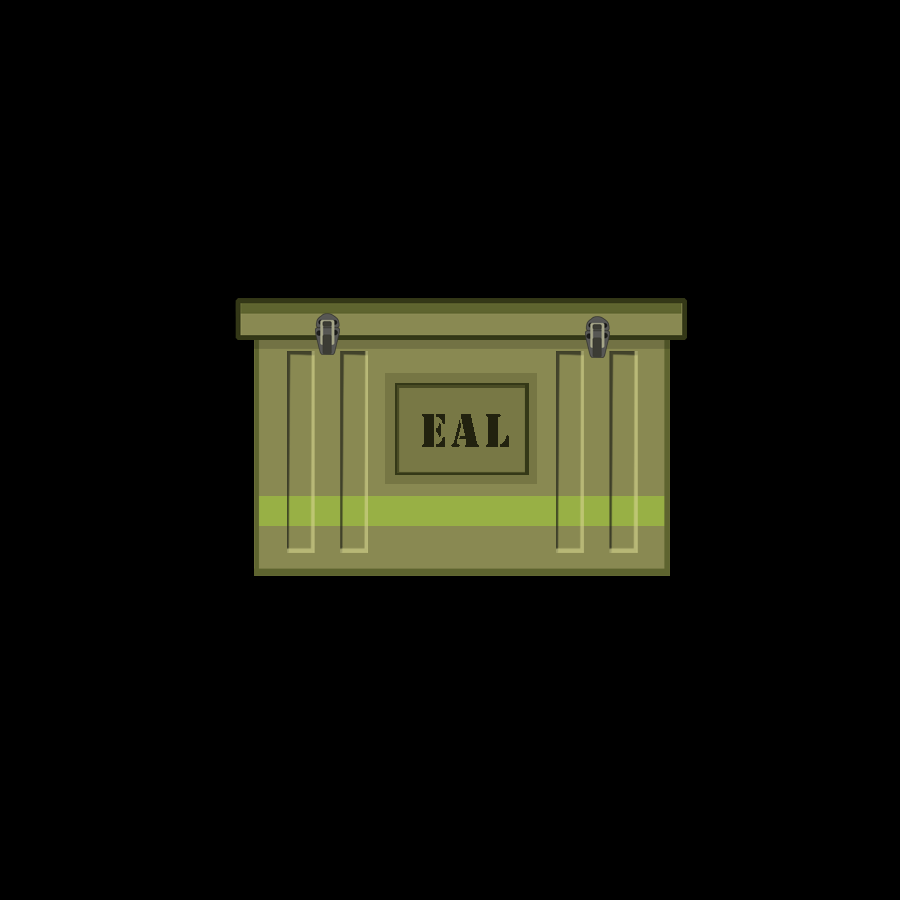
<style>
.page{position:relative;width:900px;height:900px;background:#000000}
.page>*{position:absolute;margin:0}
.t1{font:44.6px "StencilStd";letter-spacing:0.1em;color:#22220f;scale:0.92 1}
</style>
<div class="page">
<p class="t1" style="left:422px;top:414px;width:87px;height:33px">EAL</p>
</div>
